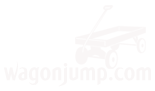
<style>
.page{position:relative;width:155px;height:91px;background:#ffffff}
.page>*{position:absolute;margin:0}
.t1{font:25.5px "Ming";color:#f9f6f6}
</style>
<div class="page">
<p class="t1" style="left:4px;top:61px;width:147px;height:26px">wagonjump.com</p>
</div>
